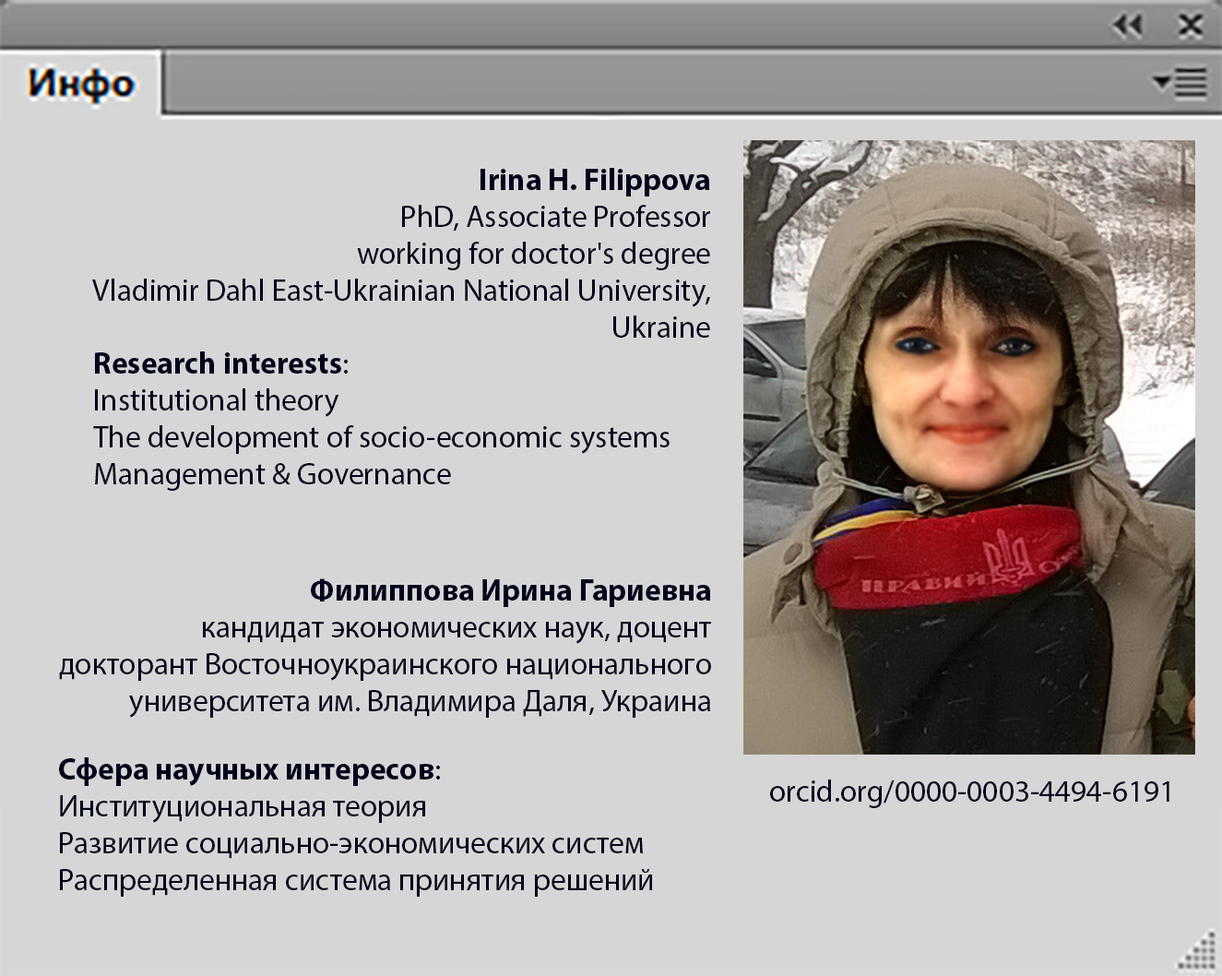
<style>
.page{position:relative;width:1222px;height:976px;background:#d6d6d6}
.page>*{position:absolute;margin:0}
.t1{font:30.7px "MyriadPro-Regular";color:#00011c}
.t2{font:30.7px "MyriadPro-Bold";color:#00011c}
</style>
<div class="page">
<p class="t1" style="left:92px;top:168px;width:618px;height:170px;text-align:right"><span class="t2">Irina H. Filippova<br></span>PhD, Associate Professor<br>working for doctor's degree<br>Vladimir Dahl East-Ukrainian National University,<br>Ukraine</p>
<p class="t1" style="left:93px;top:351px;width:577px;height:140px"><span class="t2">Research interests</span>:<br>Institutional theory<br>The development of socio-economic systems<br>Management &amp; Governance</p>
<p class="t1" style="left:59px;top:578px;width:652px;height:140px;text-align:right"><span class="t2">Филиппова Ирина Гариевна<br></span>кандидат экономических наук, доцент<br>докторант Восточноукраинского национального<br>университета им. Владимира Даля, Украина</p>
<p class="t1" style="left:59px;top:757px;width:593px;height:139px"><span class="t2">Сфера научных интересов</span>:<br>Институциональная теория<br>Развитие социально-экономических систем<br>Распределенная система принятия решений</p>
<p class="t1" style="left:770px;top:779px;width:399px;height:29px">orcid.org/0000-0003-4494-6191</p>
</div>
